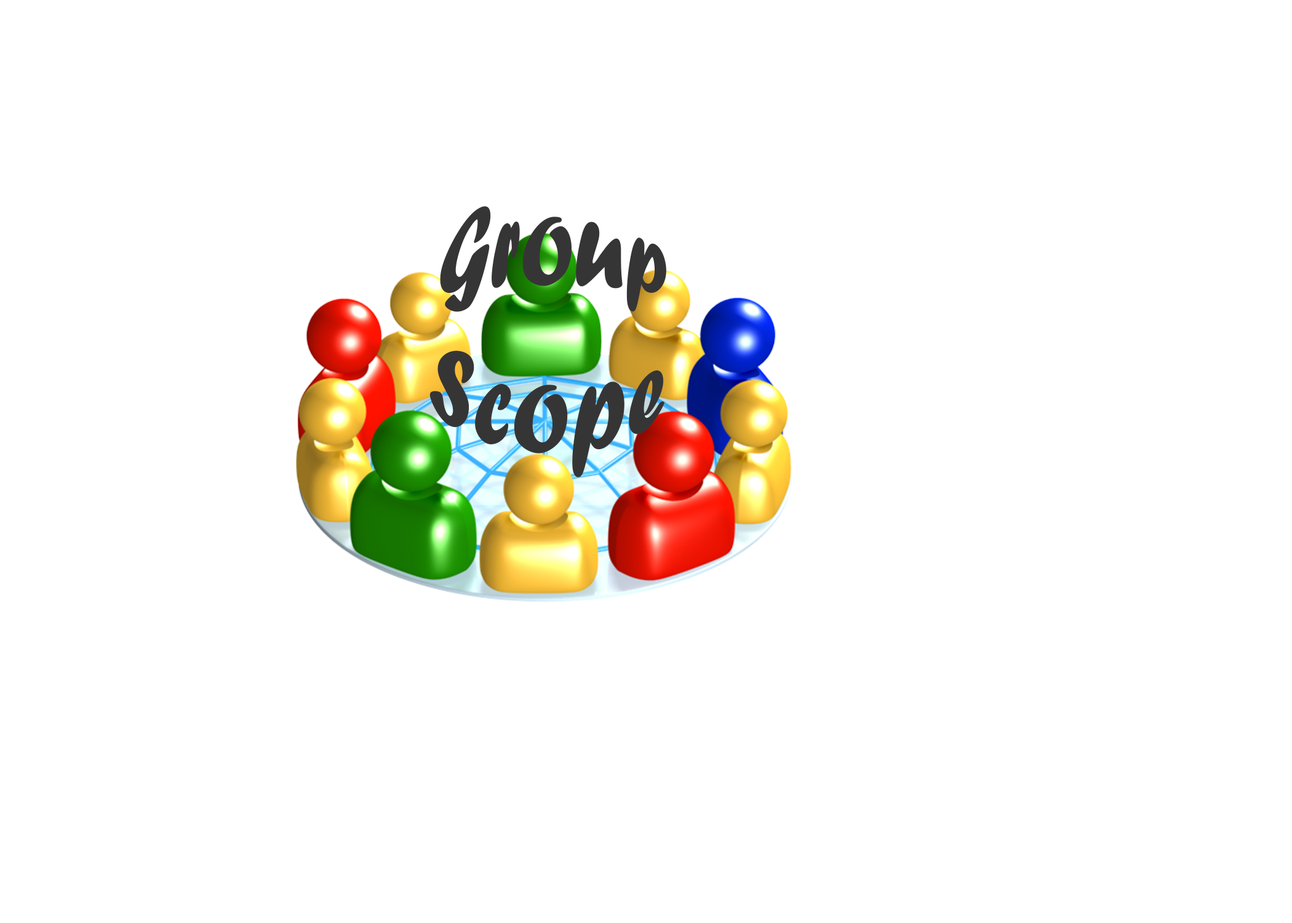
<style>
.page{position:relative;width:1292px;height:923px;background:#ffffff}
.page>*{position:absolute;margin:0}
.t1{font:92.3px "ForteMT";color:#363535}
</style>
<div class="page">
<p class="t1" style="left:429px;top:206px;width:237px;height:271px">Group<br>Scope</p>
</div>
